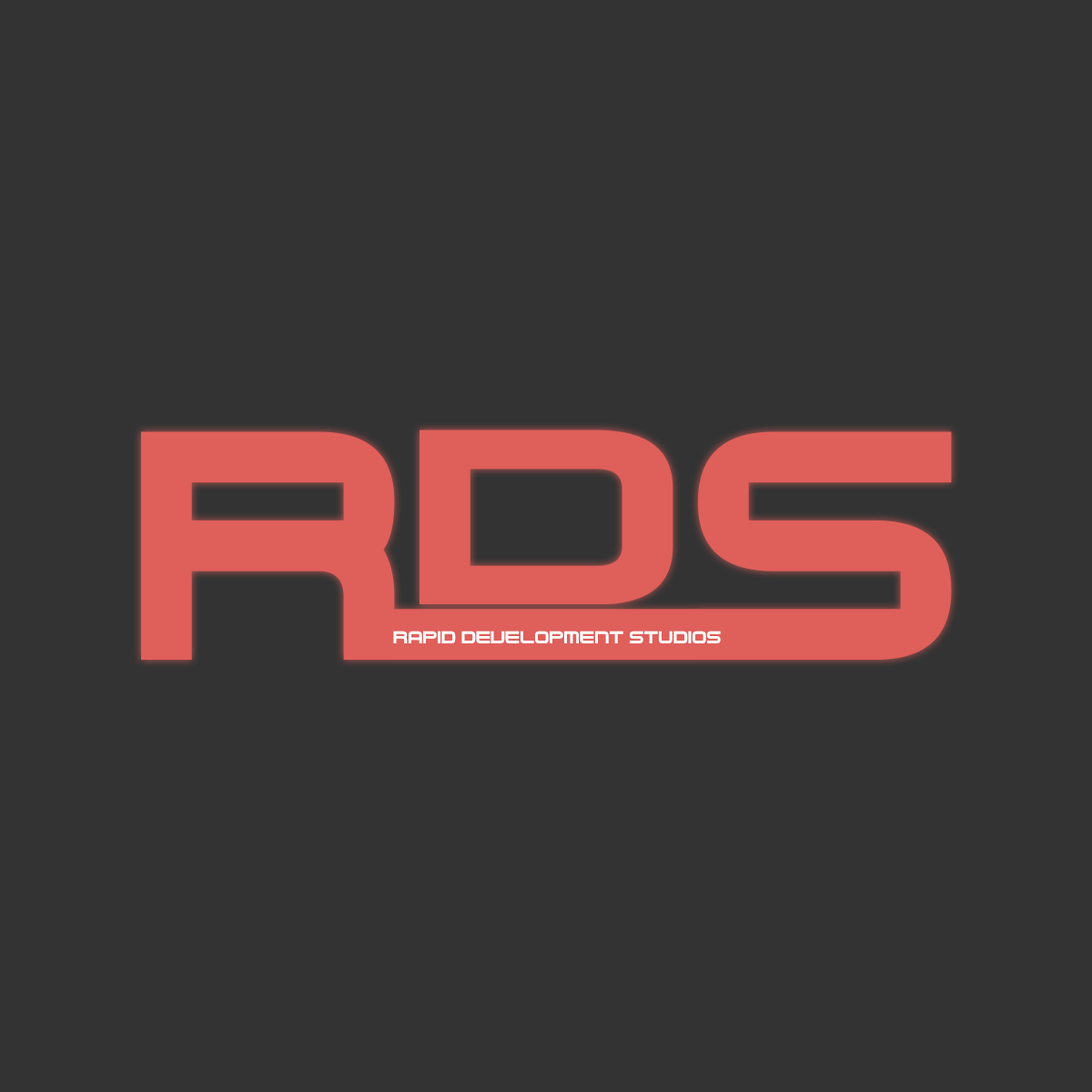
<style>
.page{position:relative;width:1092px;height:1092px;background:#333333}
.page>*{position:absolute;margin:0}
.t1{font:27.3px "NesController";color:#ffffff}
</style>
<div class="page">
<p class="t1" style="left:393px;top:631px;width:328px;height:12px">Rapid Development Studios</p>
</div>
